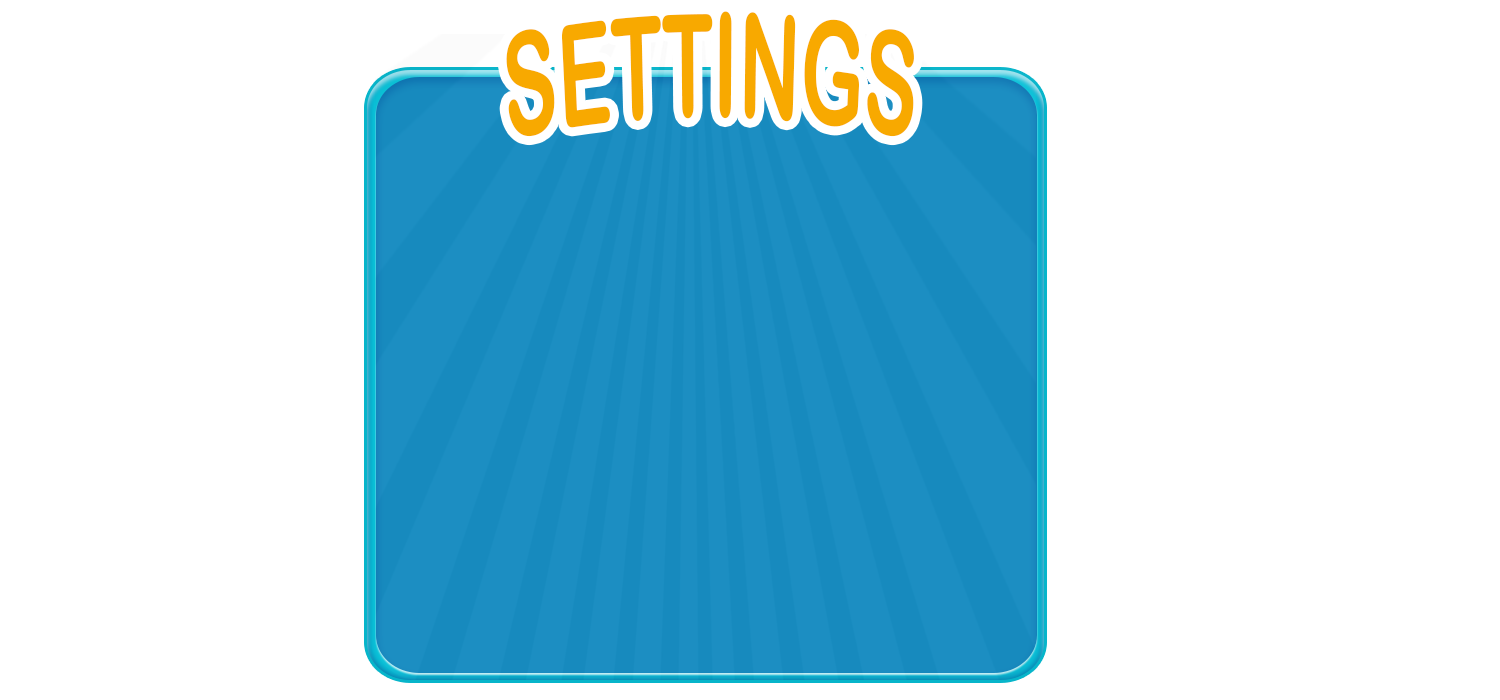
<style>
.page{position:relative;width:1500px;height:700px;background:#ffffff}
.page>*{position:absolute;margin:0}
.t1{font:143.8px "ArialRoundedMTBold";color:#f8a900;text-transform:uppercase;scale:0.55 1}
</style>
<div class="page">
<p class="t1" style="left:506px;top:11px;width:408px;height:126px">sETTINGS</p>
</div>
